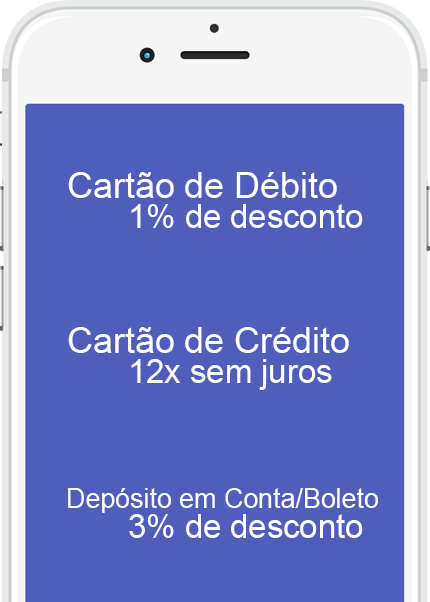
<style>
.page{position:relative;width:430px;height:602px;background:#4e5eba}
.page>*{position:absolute;margin:0}
.t1{font:35.8px "ArialMT";color:#ffffff}
.t2{font:32.8px "ArialMT";color:#ffffff}
.t3{font:26.8px "ArialMT";color:#ffffff}
</style>
<div class="page">
<p class="t1" style="left:68px;top:172px;width:269px;height:26px">Cartão de Débito</p>
<p class="t2" style="left:131px;top:204px;width:232px;height:24px">1% de desconto</p>
<p class="t1" style="left:68px;top:327px;width:281px;height:26px">Cartão de Crédito</p>
<p class="t2" style="left:131px;top:359px;width:201px;height:31px">12x sem juros</p>
<p class="t3" style="left:68px;top:488px;width:310px;height:25px">Depósito em Conta/Boleto</p>
<p class="t2" style="left:129px;top:514px;width:234px;height:24px">3% de desconto</p>
</div>
